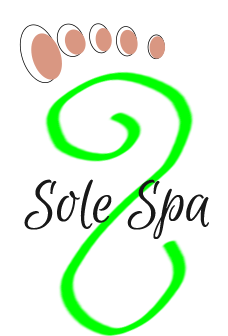
<style>
.page{position:relative;width:228px;height:336px;background:#ffffff}
.page>*{position:absolute;margin:0}
.t1{font:66.7px "EuphoriaScript-Regular";color:#181818}
</style>
<div class="page">
<p class="t1" style="left:24px;top:179px;width:185px;height:60px">Sole Spa</p>
</div>
